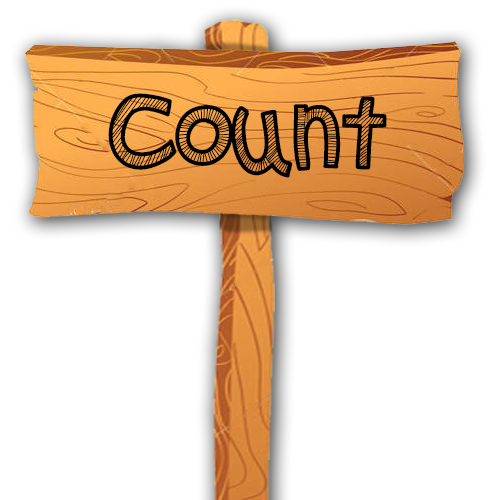
<style>
.page{position:relative;width:500px;height:500px;background:#ffffff}
.page>*{position:absolute;margin:0}
.t1{font:100px "KBZipaDeeDooDah";color:#000000}
</style>
<div class="page">
<p class="t1" style="left:108px;top:93px;width:279px;height:85px">Count</p>
</div>
